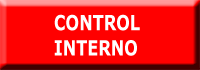
<style>
.page{position:relative;width:200px;height:70px;background:#ff0000}
.page>*{position:absolute;margin:0}
.t1{font:21px "Verdana-Bold";color:#ffffff;scale:0.76 1}
</style>
<div class="page">
<p class="t1" style="left:54px;top:14px;width:86px;height:42px">CONTROL<br>     INTERNO</p>
</div>
